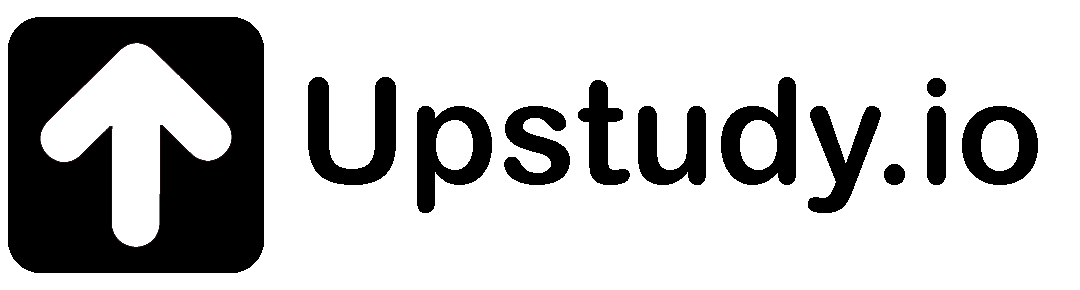
<style>
.page{position:relative;width:1080px;height:290px;background:#ffffff}
.page>*{position:absolute;margin:0}
.t1{font:145px "ArialRoundedMTBold";color:#000000}
</style>
<div class="page">
<p class="t1" style="left:308px;top:77px;width:730px;height:136px">Upstudy.io</p>
</div>
